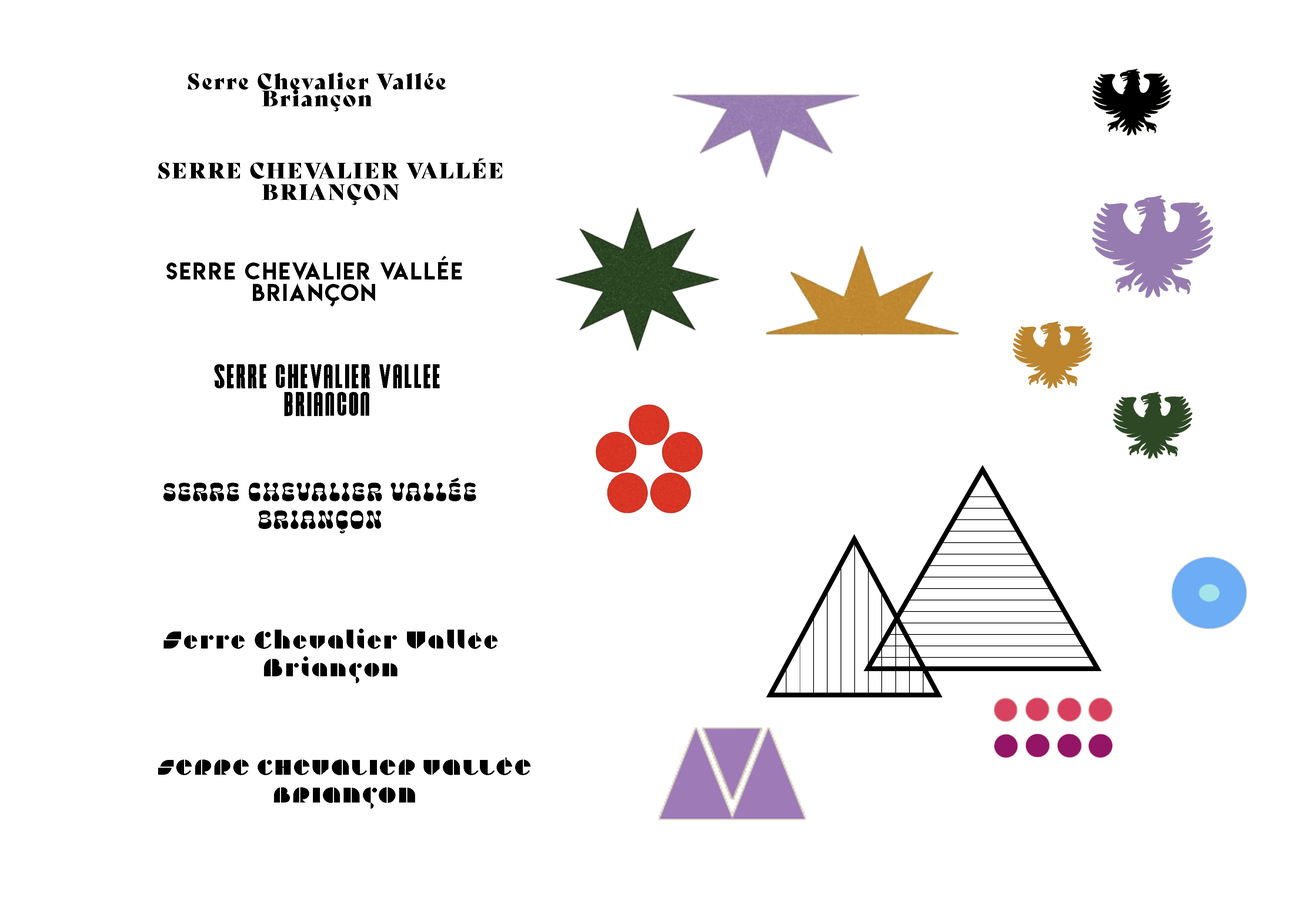
<style>
.page{position:relative;width:1299px;height:918px;background:#ffffff}
.page>*{position:absolute;margin:0}
.t1{font:21.6px/17px "BelyDisplay-Regular";letter-spacing:0.075em;color:#000000}
.t2{font:21.6px/21.6px "BelyDisplay-Regular";letter-spacing:0.075em;color:#000000}
.t3{font:21.6px/21.6px "LemonMilk";letter-spacing:0.075em;color:#000000}
.t4{font:24.7px/27.8px "NewUnicodeFont";letter-spacing:0.075em;color:#000000}
.t5{font:27.8px/27.8px "Cheee-Bingbong";letter-spacing:0.075em;color:#000000}
.t6{font:24.7px/27.8px "JeanneModernoOT-Geometrique";letter-spacing:0.075em;color:#000000}
.t7{font:21.6px/27.8px "JeanneModernoOT-Geometrique";letter-spacing:0.075em;color:#000000}
</style>
<div class="page">
<p class="t1" style="left:188px;top:73px;width:258px;height:38px;text-align:center">Serre Chevalier Vallée<br>Briançon</p>
<p class="t2" style="left:158px;top:158px;width:344px;height:47px;text-align:center">SERRE CHEVALIER VALLÉE<br>BRIANÇON</p>
<p class="t3" style="left:167px;top:256px;width:295px;height:51px;text-align:center">Serre Chevalier Vallée<br>Briançon</p>
<p class="t4" style="left:214px;top:364px;width:225px;height:52px;text-align:center">SERRE CHEVALIER VALLEE<br>BRIANCON</p>
<p class="t5" style="left:163px;top:478px;width:313px;height:55px;text-align:center">Serre chevalier vallée<br>briançon</p>
<p class="t6" style="left:164px;top:629px;width:334px;height:54px;text-align:center">Serre Chevalier Vallée<br>Briançon</p>
<p class="t7" style="left:158px;top:757px;width:373px;height:52px;text-align:center">SERRE CHEVALIER VALLÉE<br>BRIANÇON</p>
</div>
